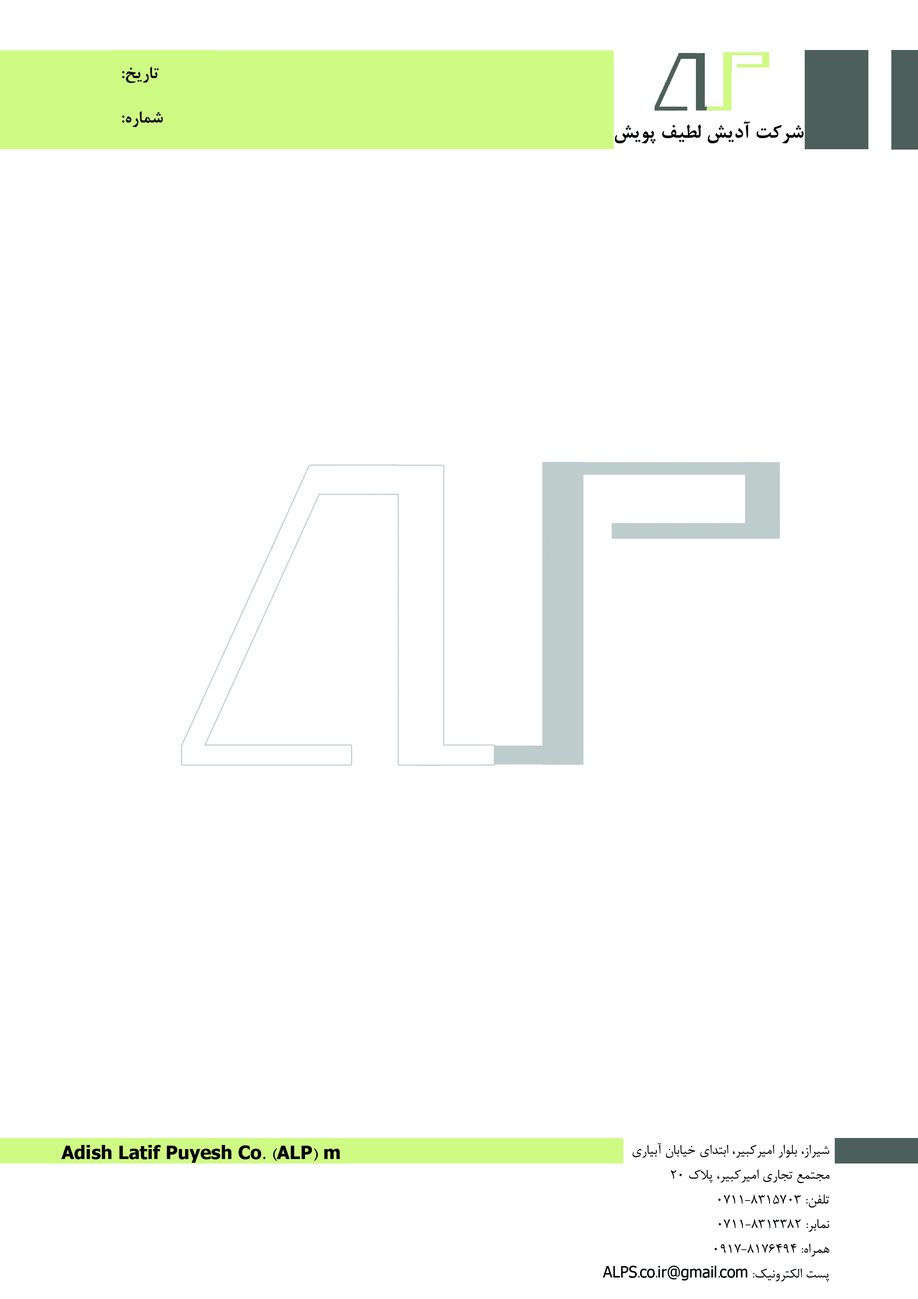
<style>
.page{position:relative;width:918px;height:1299px;background:#ffffff}
.page>*{position:absolute;margin:0}
.t1{font:18.5px "BNazaninBold";color:#060708}
.t2{font:21.6px "BNazaninBold";color:#000000}
.t3{font:18.5px "BNazaninBold";color:#000000}
.t4{font:15.4px/24.7px "BNazanin";color:#000000}
</style>
<div class="page">
<p class="t1" style="left:122px;top:67px;width:41px;height:60px;text-align:right">تاریخ:<br><br>شماره:</p>
<p class="t2" style="left:615px;top:121px;width:189px;height:23px">شرکت آدیش لطیف پویش</p>
<p class="t3" style="left:61px;top:1145px;width:279px;height:17px">Adish Latif Puyesh Co. (ALP) m</p>
<p class="t4" style="left:603px;top:1143px;width:227px;height:138px">شیراز، بلوار امیرکبیر، ابتدای خیابان آبیاری<br>مجتمع تجاری امیرکبیر، پلاک 20<br>تلفن: 0711-8315703<br>نمابر: 0711-8313382<br>همراه: 0917-8176494<br>پست الکترونیک: ALPS.co.ir@gmail.com</p>
</div>
